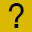
<style>
.page{position:relative;width:32px;height:32px;background:#dab902}
.page>*{position:absolute;margin:0}
.t1{font:17.2px "HelveticaNeue";color:#000000}
</style>
<div class="page">
<p class="t1" style="left:8px;top:3px;width:16px;height:25px">?</p>
</div>
